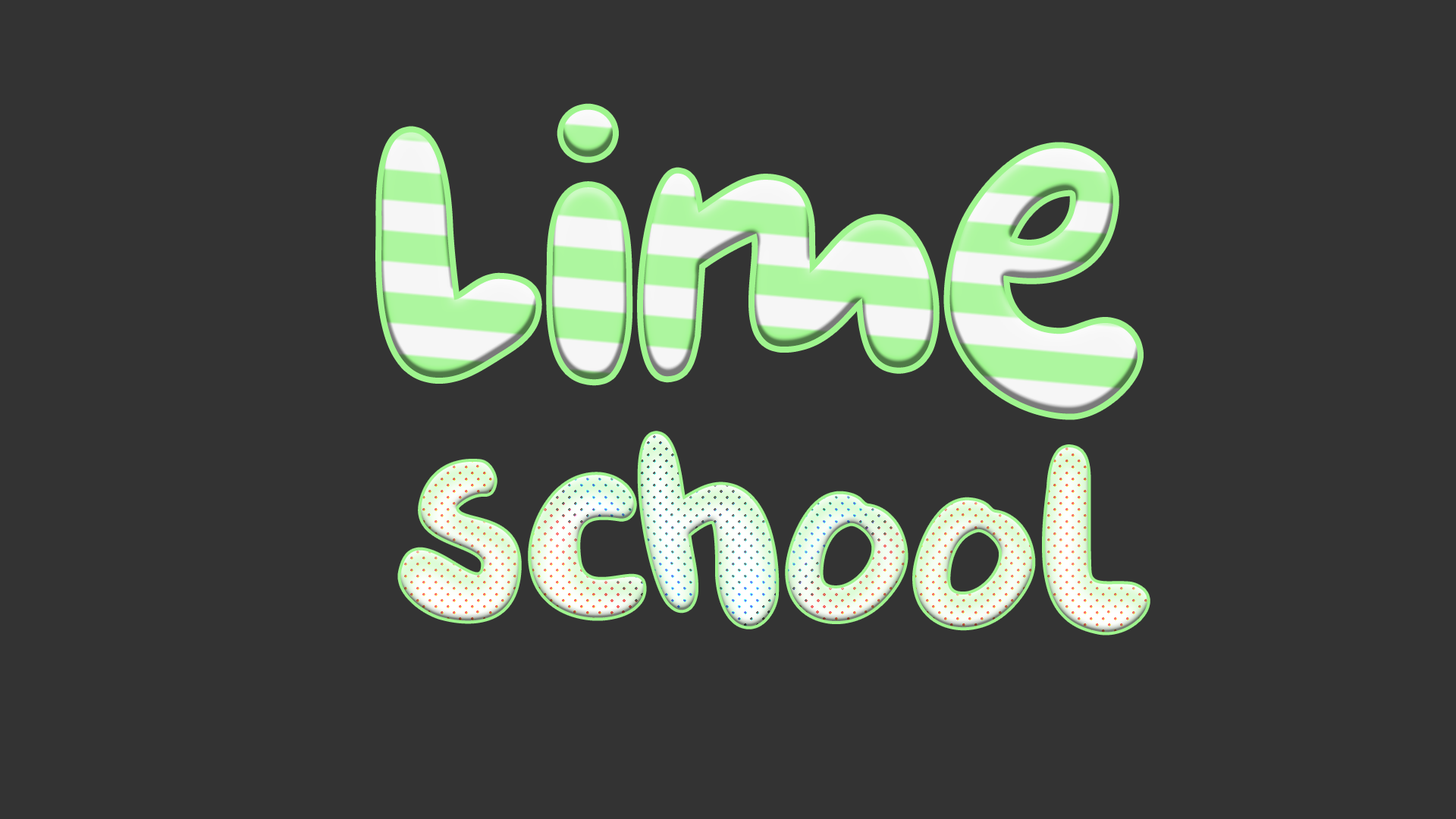
<style>
.page{position:relative;width:1456px;height:819px;background:#333333}
.page>*{position:absolute;margin:0}
.t1{font:404.4px "DKBurobu-Regular"}
.t2{font:284.4px "DKBurobu-Regular";color:#f5f5f5}
</style>
<div class="page">
<p class="t1" style="left:381px;top:109px;width:756px;height:305px">Lime</p>
<p class="t2" style="left:400px;top:434px;width:747px;height:198px;rotate:3deg">school</p>
</div>
